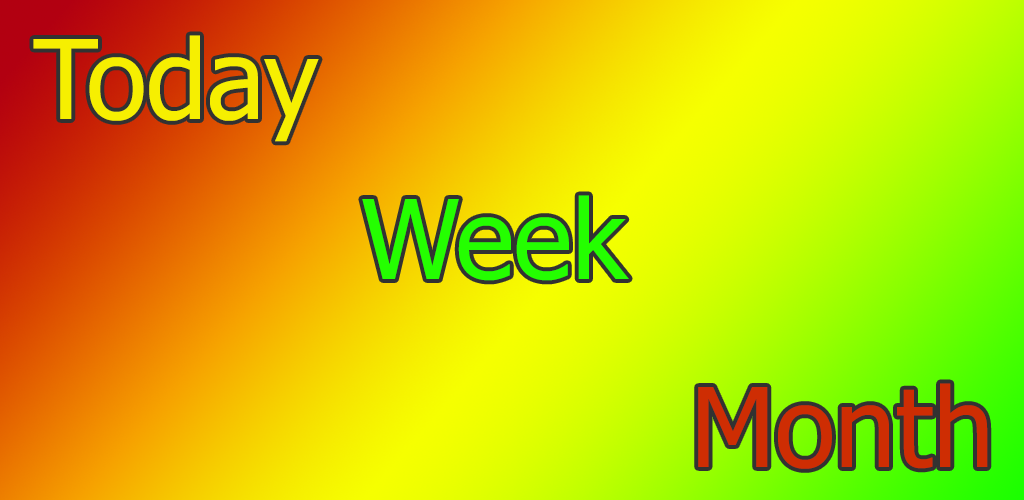
<style>
.page{position:relative;width:1024px;height:500px}
.page>*{position:absolute;margin:0}
.t1{font:110px "Tahoma";color:#f6ef01}
.t2{font:110px "Tahoma";color:#24ff00}
.t3{font:110px "Tahoma";color:#ce2d03}
</style>
<div class="page">
<p class="t1" style="left:33px;top:35px;width:286px;height:107px">Today</p>
<p class="t2" style="left:362px;top:195px;width:267px;height:86px">Week</p>
<p class="t3" style="left:698px;top:383px;width:290px;height:86px">Month</p>
</div>
